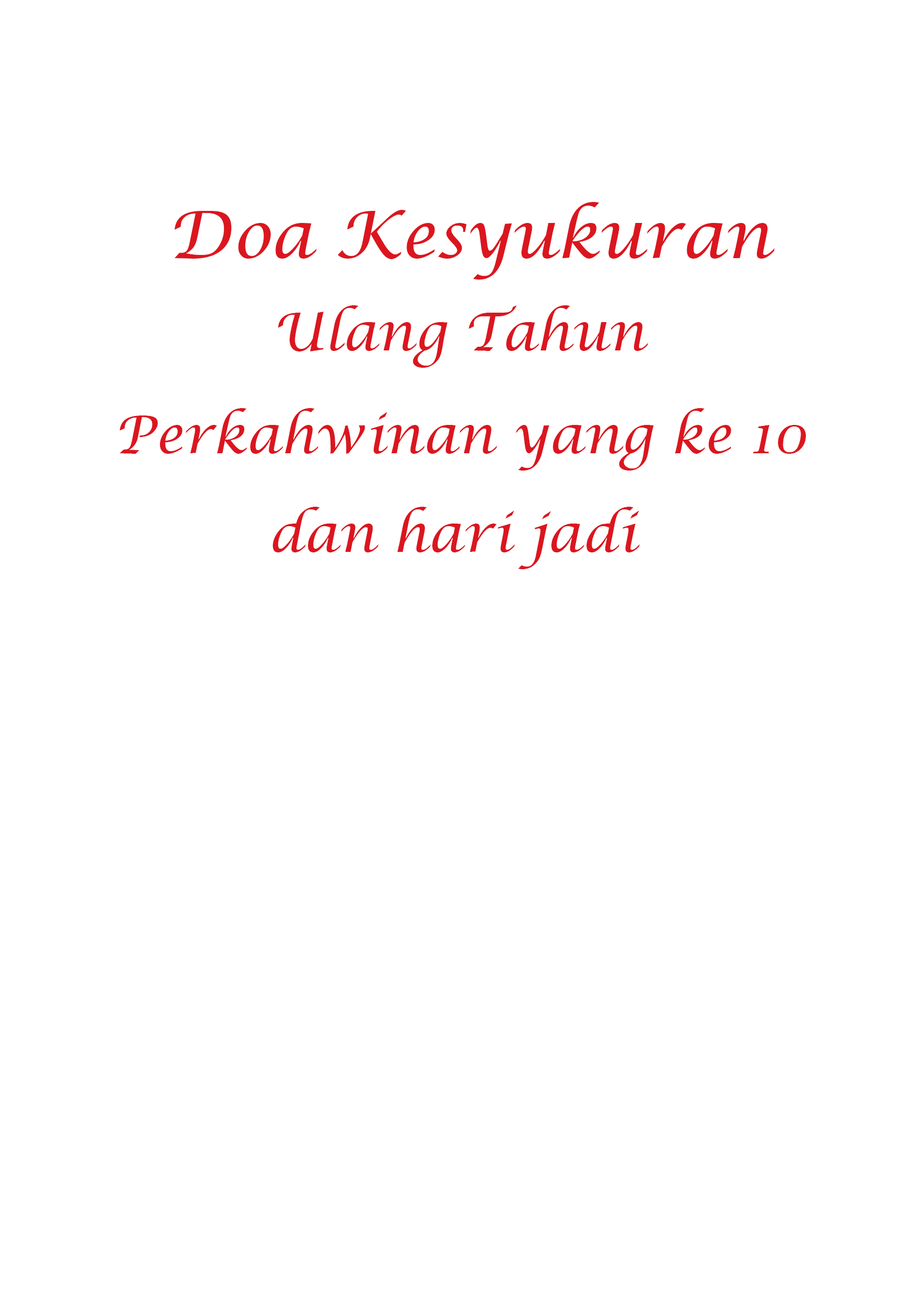
<style>
.page{position:relative;width:917px;height:1301px;background:#ffffff}
.page>*{position:absolute;margin:0}
.t1{font:65.6px "LucidaCalligraphy-Italic";color:#db161f}
.t2{font:52.4px "LucidaCalligraphy-Italic";color:#db161f}
</style>
<div class="page">
<p class="t1" style="left:174px;top:202px;width:601px;height:78px">Doa Kesyukuran</p>
<p class="t2" style="left:278px;top:305px;width:370px;height:63px">Ulang Tahun</p>
<p class="t2" style="left:120px;top:408px;width:686px;height:62px">Perkahwinan yang ke 10</p>
<p class="t2" style="left:273px;top:507px;width:367px;height:62px">dan hari jadi</p>
</div>
